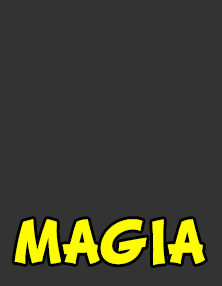
<style>
.page{position:relative;width:222px;height:286px;background:#333333}
.page>*{position:absolute;margin:0}
.t1{font:48px "BDCartoonShout";color:#fffc00}
</style>
<div class="page">
<p class="t1" style="left:14px;top:219px;width:191px;height:47px">MAGIA</p>
</div>
